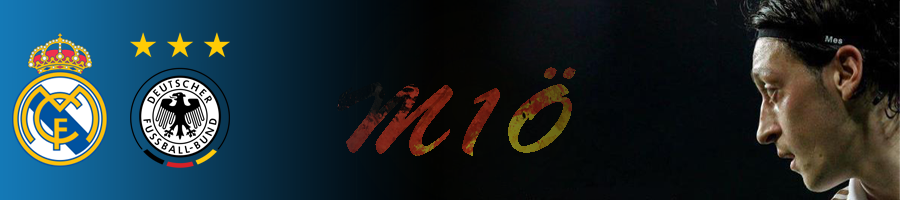
<style>
.page{position:relative;width:900px;height:200px}
.page>*{position:absolute;margin:0}
.t1{font:100px "BrushScriptStd"}
</style>
<div class="page">
<p class="t1" style="left:337px;top:67px;width:239px;height:89px">M1Ö</p>
</div>
